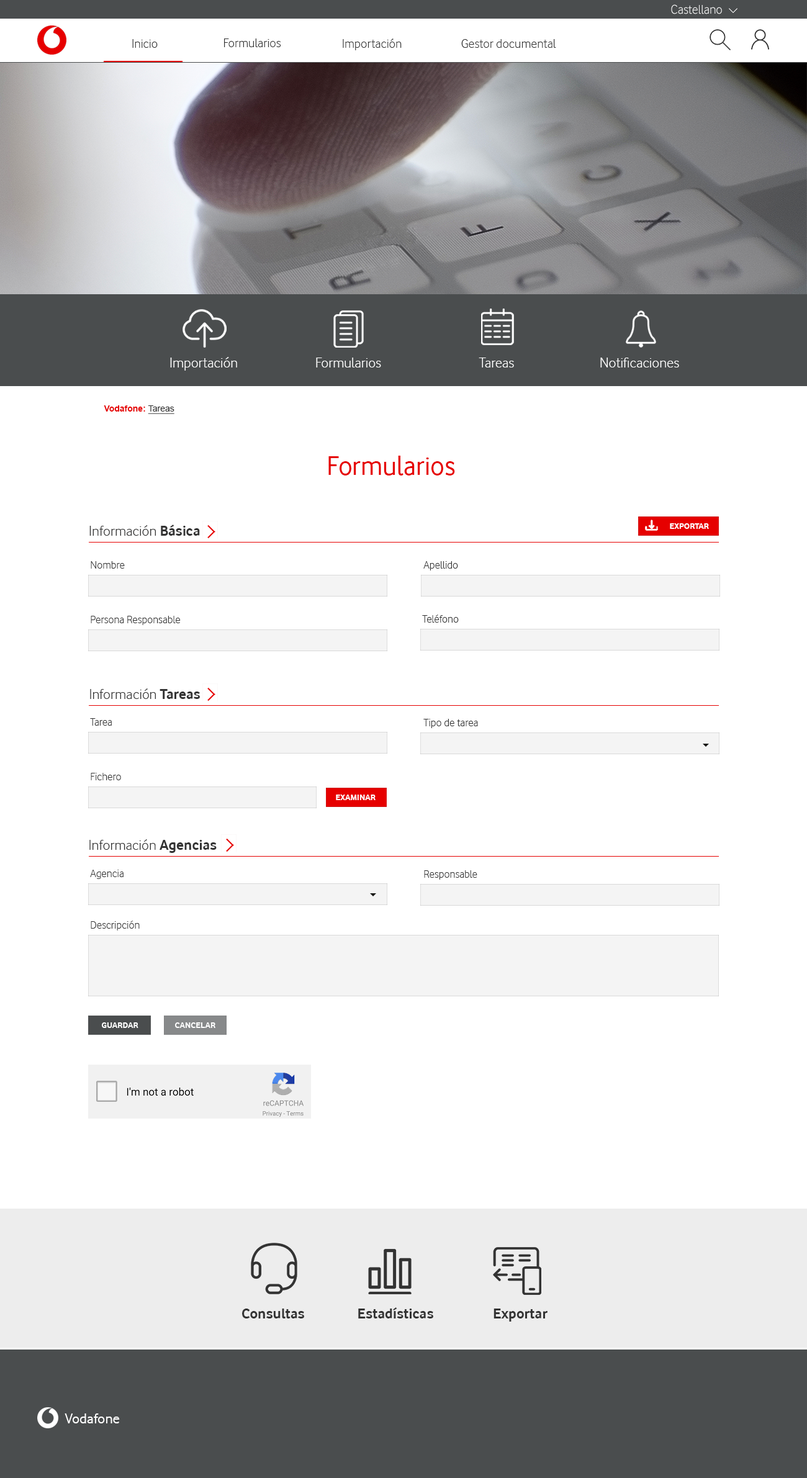
<style>
.page{position:relative;width:807px;height:1478px;background:#ffffff}
.page>*{position:absolute;margin:0}
.t1{font:13px "VodafoneLt-Regular";color:#ffffff}
.t2{font:13px "VodafoneLt-Regular";color:#333333}
.t3{font:14.9px "VodafoneLt-Regular";color:#ffffff}
.t4{font:8.7px "Arial-BoldMT";color:#e60000}
.t5{font:8.7px "ArialMT";color:#333333;text-decoration:underline}
.t6{font:27.9px "VodafoneRg-Regular";color:#e60000}
.t7{font:14.9px "VodafoneLt-Regular";color:#333333}
.t8{font:14.9px "VodafoneRg-Bold";color:#333333}
.t9{font:8.7px "VodafoneRg-Bold";color:#ffffff}
.t10{font:11.2px "VodafoneLt-Regular";color:#333333}
.t11{font:14.9px "VodafoneRg-Regular";color:#ffffff}
</style>
<div class="page">
<p class="t1" style="left:671px;top:4px;width:51px;height:10px">Castellano</p>
<p class="t2" style="left:132px;top:39px;width:26px;height:9px">Inicio</p>
<p class="t2" style="left:224px;top:38px;width:57px;height:9px">Formularios</p>
<p class="t2" style="left:343px;top:38px;width:59px;height:12px">Importación</p>
<p class="t2" style="left:461px;top:39px;width:95px;height:9px">Gestor documental</p>
<p class="t3" style="left:170px;top:357px;width:67px;height:14px">Importación</p>
<p class="t3" style="left:316px;top:358px;width:65px;height:9px">Formularios</p>
<p class="t3" style="left:479px;top:358px;width:35px;height:9px">Tareas</p>
<p class="t3" style="left:600px;top:358px;width:79px;height:9px">Notificaciones</p>
<p class="t4" style="left:104px;top:405px;width:70px;height:9px">Vodafone: <span class="t5">Tareas</span></p>
<p class="t6" style="left:328px;top:456px;width:127px;height:19px">Formularios</p>
<p class="t7" style="left:89px;top:524px;width:111px;height:12px">Información <span class="t8">Básica</span></p>
<p class="t9" style="left:670px;top:523px;width:39px;height:6px">EXPORTAR</p>
<p class="t10" style="left:91px;top:561px;width:34px;height:8px">Nombre</p>
<p class="t10" style="left:423px;top:561px;width:35px;height:9px">Apellido</p>
<p class="t10" style="left:91px;top:616px;width:90px;height:9px">Persona Responsable</p>
<p class="t10" style="left:422px;top:614px;width:37px;height:9px">Teléfono</p>
<p class="t7" style="left:90px;top:688px;width:110px;height:11px">Información <span class="t8">Tareas</span></p>
<p class="t10" style="left:90px;top:718px;width:22px;height:8px">Tarea</p>
<p class="t10" style="left:423px;top:719px;width:55px;height:9px">Tipo de tarea</p>
<p class="t10" style="left:91px;top:773px;width:30px;height:7px">Fichero</p>
<p class="t9" style="left:336px;top:794px;width:40px;height:6px">EXAMINAR</p>
<p class="t7" style="left:89px;top:839px;width:128px;height:14px">Información <span class="t8">Agencias</span></p>
<p class="t10" style="left:90px;top:870px;width:34px;height:9px">Agencia</p>
<p class="t10" style="left:424px;top:870px;width:53px;height:9px">Responsable</p>
<p class="t10" style="left:91px;top:920px;width:49px;height:10px">Descripción</p>
<p class="t9" style="left:102px;top:1022px;width:36px;height:6px">GUARDAR</p>
<p class="t9" style="left:175px;top:1022px;width:40px;height:6px">CANCELAR</p>
<p class="t8" style="left:242px;top:1308px;width:62px;height:10px">Consultas</p>
<p class="t8" style="left:358px;top:1307px;width:75px;height:11px">Estadísticas</p>
<p class="t8" style="left:493px;top:1308px;width:54px;height:13px">Exportar</p>
<p class="t11" style="left:65px;top:1413px;width:55px;height:10px">Vodafone</p>
</div>
